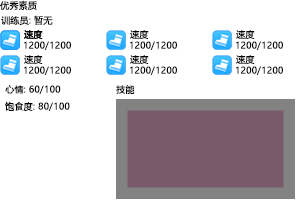
<style>
.page{position:relative;width:300px;height:200px;background:#ffffff}
.page>*{position:absolute;margin:0}
.t1{font:9px "MicrosoftYaHei";color:#000000;font-weight:bold}
</style>
<div class="page">
<p class="t1" style="left:0px;top:0px;width:37px;height:10px">优秀素质</p>
<p class="t1" style="left:1px;top:15px;width:52px;height:10px">训练员: 暂无</p>
<p class="t1" style="left:24px;top:30px;width:19px;height:9px">速度</p>
<p class="t1" style="left:24px;top:30px;width:19px;height:9px">速度</p>
<p class="t1" style="left:130px;top:30px;width:19px;height:9px">速度</p>
<p class="t1" style="left:236px;top:30px;width:19px;height:9px">速度</p>
<p class="t1" style="left:24px;top:41px;width:47px;height:9px">1200/1200</p>
<p class="t1" style="left:130px;top:41px;width:47px;height:9px">1200/1200</p>
<p class="t1" style="left:236px;top:41px;width:47px;height:9px">1200/1200</p>
<p class="t1" style="left:24px;top:55px;width:19px;height:9px">速度</p>
<p class="t1" style="left:130px;top:55px;width:19px;height:9px">速度</p>
<p class="t1" style="left:236px;top:55px;width:19px;height:9px">速度</p>
<p class="t1" style="left:24px;top:66px;width:47px;height:9px">1200/1200</p>
<p class="t1" style="left:130px;top:66px;width:47px;height:9px">1200/1200</p>
<p class="t1" style="left:236px;top:66px;width:47px;height:9px">1200/1200</p>
<p class="t1" style="left:5px;top:85px;width:56px;height:9px">心情: 60/100</p>
<p class="t1" style="left:116px;top:85px;width:19px;height:9px">技能</p>
<p class="t1" style="left:5px;top:101px;width:65px;height:10px">饱食度: 80/100</p>
</div>
